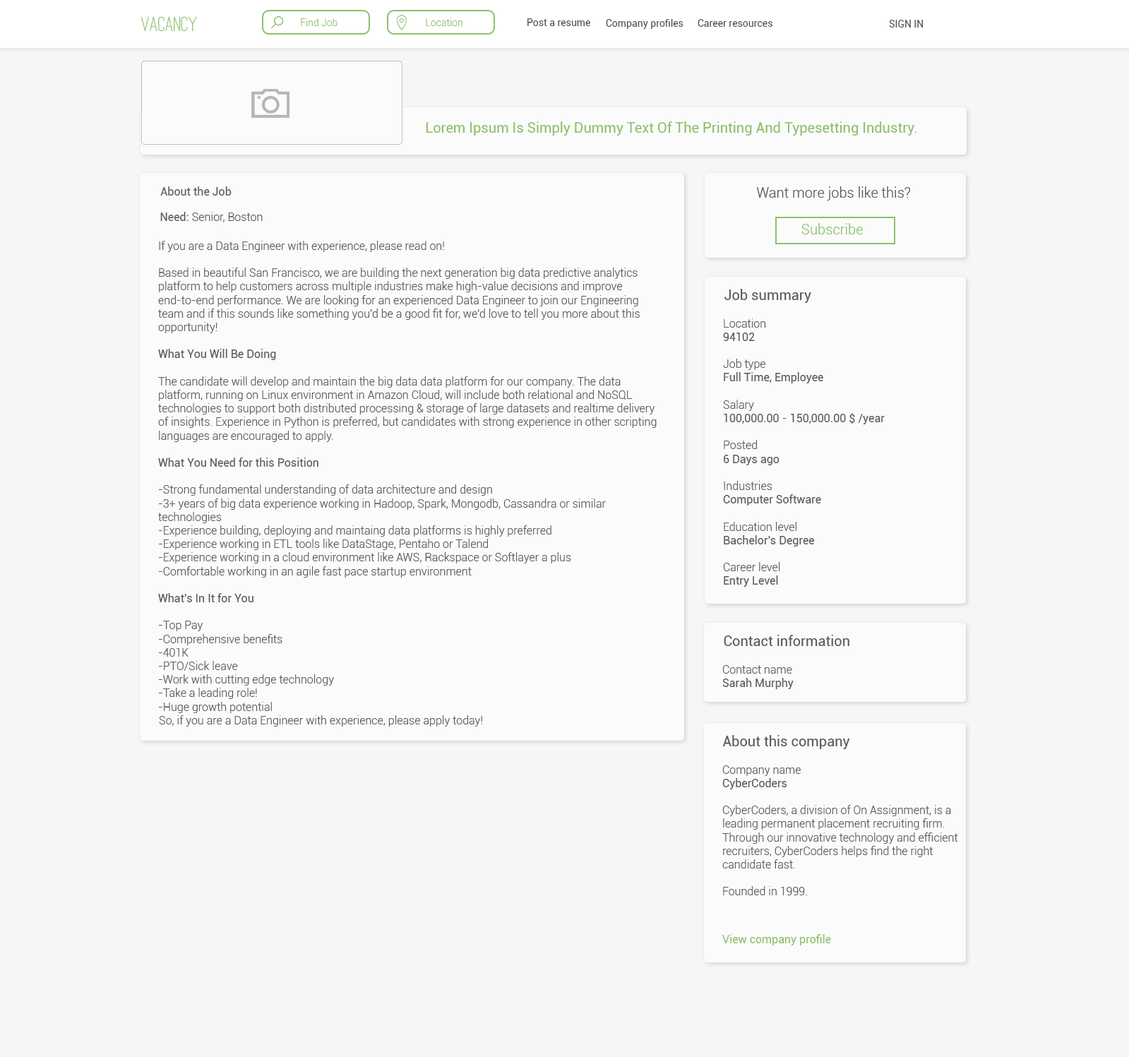
<style>
.page{position:relative;width:1129px;height:1057px;background:#f6f6f6}
.page>*{position:absolute;margin:0}
.t1{font:21.2px "OstrichSans-Medium";color:#8ec06c}
.t2{font:9.9px "Roboto-Light";color:#8ec06c}
.t3{font:9.9px "Roboto-Regular";color:#565454}
.t4{font:14.1px "Roboto-Regular";color:#8ec06c}
.t5{font:11.3px "Roboto-Light";color:#5d5c5c}
.t6{font:11.3px "Roboto-Regular";color:#5d5c5c}
.t7{font:14.1px "Roboto-Light";color:#5d5c5c}
.t8{font:14.1px "Roboto-Light";color:#8ec06c}
.t9{font:14.1px "Roboto-Regular";color:#5d5c5c}
.t10{font:11.3px "Roboto-Regular";color:#8ec06c}
</style>
<div class="page">
<p class="t1" style="left:141px;top:16px;width:56px;height:16px">VACANCY</p>
<p class="t2" style="left:301px;top:18px;width:36px;height:8px">Find Job</p>
<p class="t2" style="left:426px;top:18px;width:36px;height:8px">Location</p>
<p class="t3" style="left:527px;top:18px;width:63px;height:8px">Post a resume</p>
<p class="t3" style="left:606px;top:19px;width:77px;height:10px">Company profiles</p>
<p class="t3" style="left:697px;top:19px;width:75px;height:8px">Career resources</p>
<p class="t3" style="left:889px;top:20px;width:34px;height:8px">SIGN IN</p>
<p class="t4" style="left:426px;top:121px;width:490px;height:15px">Lorem Ipsum Is Simply Dummy Text Of The Printing And Typesetting Industry.</p>
<p class="t5" style="left:158px;top:186px;width:498px;height:540px"><span class="t6">About the Job<br><br><br></span><br>If you are a Data Engineer with experience, please read on!<br><br>Based in beautiful San Francisco, we are building the next generation big data predictive analytics platform to help customers across multiple industries make high-value decisions and improve end-to-end performance. We are looking for an experienced Data Engineer to join our Engineering team and if this sounds like something you'd be a good fit for, we'd love to tell you more about this opportunity!<br><br><span class="t6">What You Will Be Doing<br></span><br>The candidate will develop and maintain the big data data platform for our company. The data platform, running on Linux environment in Amazon Cloud, will include both relational and NoSQL technologies to support both distributed processing &amp; storage of large datasets and realtime delivery of insights. Experience in Python is preferred, but candidates with strong experience in other scripting languages are encouraged to apply.<br><br><span class="t6">What You Need for this Position<br></span><br>-Strong fundamental understanding of data architecture and design<br>-3+ years of big data experience working in Hadoop, Spark, Mongodb, Cassandra or similar technologies<br>-Experience building, deploying and maintaing data platforms is highly preferred<br>-Experience working in ETL tools like DataStage, Pentaho or Talend<br>-Experience working in a cloud environment like AWS, Rackspace or Softlayer a plus<br>-Comfortable working in an agile fast pace startup environment<br><br><span class="t6">What's In It for You<br></span><br>-Top Pay <br>-Comprehensive benefits<br>-401K<br>-PTO/Sick leave<br>-Work with cutting edge technology<br>-Take a leading role!<br>-Huge growth potential<br>So, if you are a Data Engineer with experience, please apply today!</p>
<p class="t7" style="left:756px;top:186px;width:154px;height:14px">Want more jobs like this?</p>
<p class="t5" style="left:160px;top:212px;width:103px;height:10px"><span class="t6">Need: </span>Senior, Boston</p>
<p class="t8" style="left:801px;top:223px;width:61px;height:11px">Subscribe</p>
<p class="t6" style="left:723px;top:289px;width:161px;height:298px"><span class="t9">Job summary<br></span><span class="t5"><br>Location<br></span>94102<br><br><span class="t5">Job type<br></span>Full Time, Employee<br><span class="t5"><br>Salary<br></span>100,000.00 - 150,000.00 $ /year<br><br><span class="t5">Posted<br></span>6 Days ago<br><span class="t5"><br>Industries<br></span>Computer Software<br><span class="t5"><br>Education level<br></span>Bachelor's Degree<br><span class="t5"><br>Career level<br></span>Entry Level</p>
<p class="t9" style="left:722px;top:635px;width:127px;height:54px">Contact information<br><span class="t5"><br>Contact name<br></span><span class="t6">Sarah Murphy</span></p>
<p class="t5" style="left:722px;top:735px;width:236px;height:160px"><span class="t9">About this company<br></span><br>Company name<br><span class="t6">CyberCoders<br><br></span>CyberCoders, a division of On Assignment, is a leading permanent placement recruiting firm. Through our innovative technology and efficient recruiters, CyberCoders helps find the right candidate fast.<br><br>Founded in 1999.</p>
<p class="t10" style="left:722px;top:934px;width:109px;height:11px">View company profile</p>
</div>
